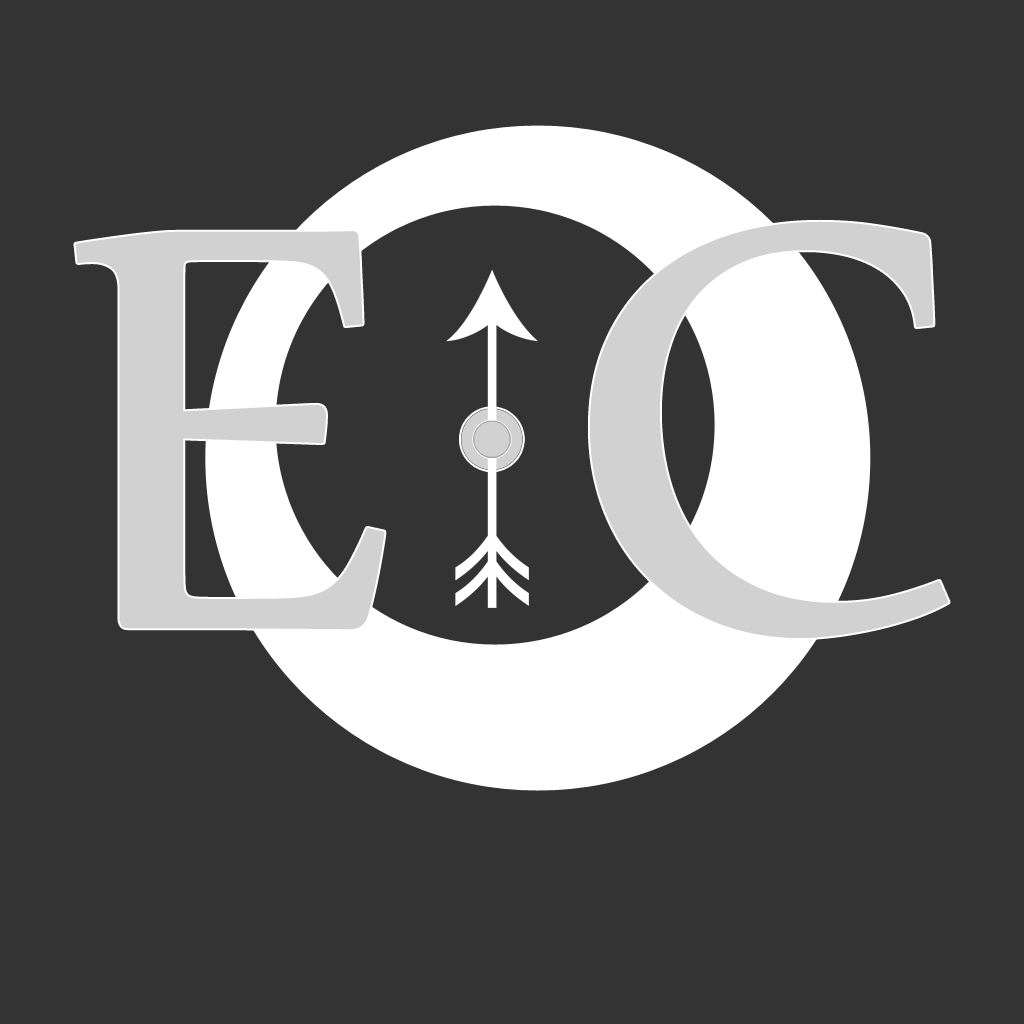
<style>
.page{position:relative;width:1024px;height:1024px;background:#333333}
.page>*{position:absolute;margin:0}
.t1{font:700px "Nyala-Regular";color:#d1d1d1}
</style>
<div class="page">
<p class="t1" style="left:75px;top:221px;width:874px;height:417px">E C</p>
</div>
